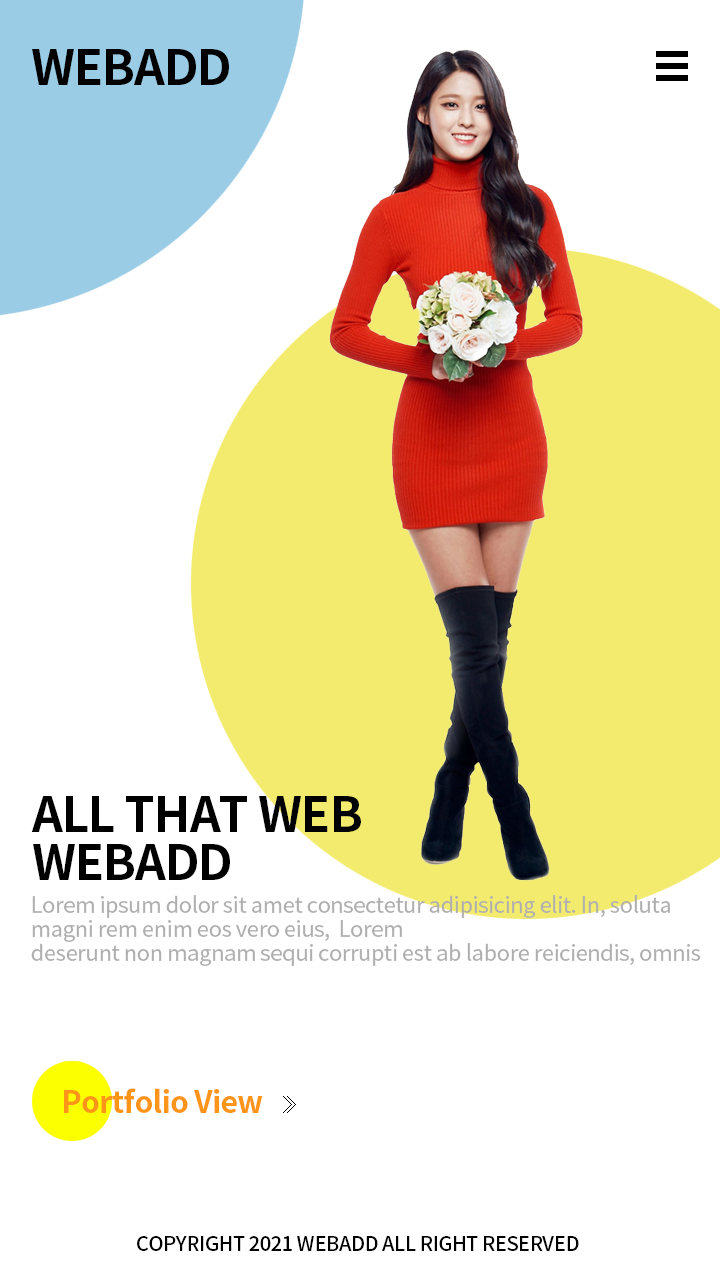
<style>
.page{position:relative;width:720px;height:1280px;background:#ffffff}
.page>*{position:absolute;margin:0}
.t1{font:48px "NotoSansCJKkr-Bold";letter-spacing:-0.02em;color:#000000}
.t2{font:48px/48px "NotoSansCJKkr-Bold";letter-spacing:-0.02em;color:#000000}
.t3{font:22px/24px "NotoSansCJKkr-Regular";letter-spacing:-0.02em;color:#9f9f9f}
.t4{font:30px "NotoSansCJKkr-Bold";letter-spacing:-0.02em;color:#ff7e00}
.t5{font:20px "NotoSansCJKkr-Medium";letter-spacing:-0.02em;color:#000000}
</style>
<div class="page">
<p class="t1" style="left:32px;top:49px;width:197px;height:36px">WEBADD</p>
<p class="t2" style="left:31px;top:796px;width:330px;height:84px">ALL THAT WEB<br>WEBADD</p>
<p class="t3" style="left:31px;top:895px;width:670px;height:71px">Lorem ipsum dolor sit amet consectetur adipisicing elit. In, soluta magni rem enim eos vero eius,  Lorem <br>deserunt non magnam sequi corrupti est ab labore reiciendis, omnis</p>
<p class="t4" style="left:64px;top:1088px;width:199px;height:25px">Portfolio View</p>
<p class="t5" style="left:137px;top:1236px;width:442px;height:15px">COPYRIGHT 2021 WEBADD ALL RIGHT RESERVED</p>
</div>
